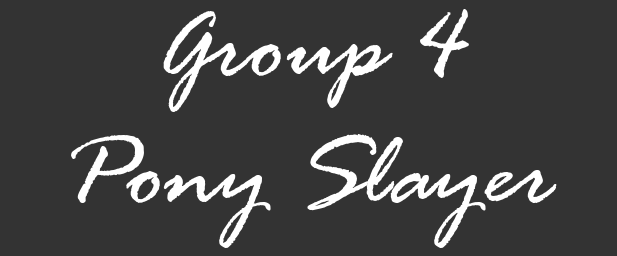
<style>
.page{position:relative;width:617px;height:256px;background:#333333}
.page>*{position:absolute;margin:0}
.t1{font:105.8px "RageItalic";color:#ffffff}
</style>
<div class="page">
<p class="t1" style="left:71px;top:9px;width:486px;height:239px;text-align:center">Group 4<br>Pony Slayer</p>
</div>
